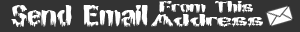
<style>
.page{position:relative;width:300px;height:32px;background:#333333}
.page>*{position:absolute;margin:0}
.t1{font:30px "BNMansonNights";color:#ffffff}
.t2{font:16.2px "BNMansonNights";color:#ffffff;scale:1.39 1}
.t3{font:17.4px "BNMansonNights";color:#ffffff;scale:1.83 1}
</style>
<div class="page">
<p class="t1" style="left:11px;top:5px;width:137px;height:22px">Send Email</p>
<p class="t2" style="left:159px;top:1px;width:94px;height:12px">From This</p>
<p class="t3" style="left:151px;top:14px;width:112px;height:13px">Address</p>
</div>
